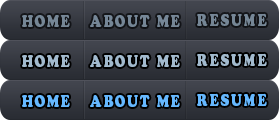
<style>
.page{position:relative;width:279px;height:120px}
.page>*{position:absolute;margin:0}
.t1{font:16.7px "CooperBlackStd";letter-spacing:0.125em;color:#768796;text-transform:uppercase;scale:0.78 1}
.t2{font:16.7px "CooperBlackStd";letter-spacing:0.125em;color:#758697;text-transform:uppercase;scale:0.78 1}
.t3{font:16.7px "CooperBlackStd";letter-spacing:0.125em;color:#a2bace;text-transform:uppercase;scale:0.78 1}
.t4{font:16.7px "CooperBlackStd";letter-spacing:0.125em;color:#66b8ff;text-transform:uppercase;scale:0.78 1}
</style>
<div class="page">
<p class="t1" style="left:22px;top:14px;width:48px;height:13px">Home</p>
<p class="t2" style="left:90px;top:14px;width:90px;height:13px">About me</p>
<p class="t1" style="left:197px;top:13px;width:70px;height:13px">Resume</p>
<p class="t3" style="left:22px;top:54px;width:48px;height:13px">Home</p>
<p class="t3" style="left:90px;top:54px;width:90px;height:13px">About me</p>
<p class="t3" style="left:197px;top:53px;width:70px;height:13px">Resume</p>
<p class="t4" style="left:22px;top:94px;width:48px;height:13px">Home</p>
<p class="t4" style="left:90px;top:94px;width:90px;height:13px">About me</p>
<p class="t4" style="left:197px;top:93px;width:70px;height:13px">Resume</p>
</div>
